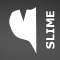
<style>
.page{position:relative;width:60px;height:60px;background:#ffffff}
.page>*{position:absolute;margin:0}
.t1{font:11px "Verdana-Bold";color:#ffffff}
</style>
<div class="page">
<p class="t1" style="left:46px;top:11px;width:9px;height:38px;rotate:-90deg">SLIME</p>
</div>
